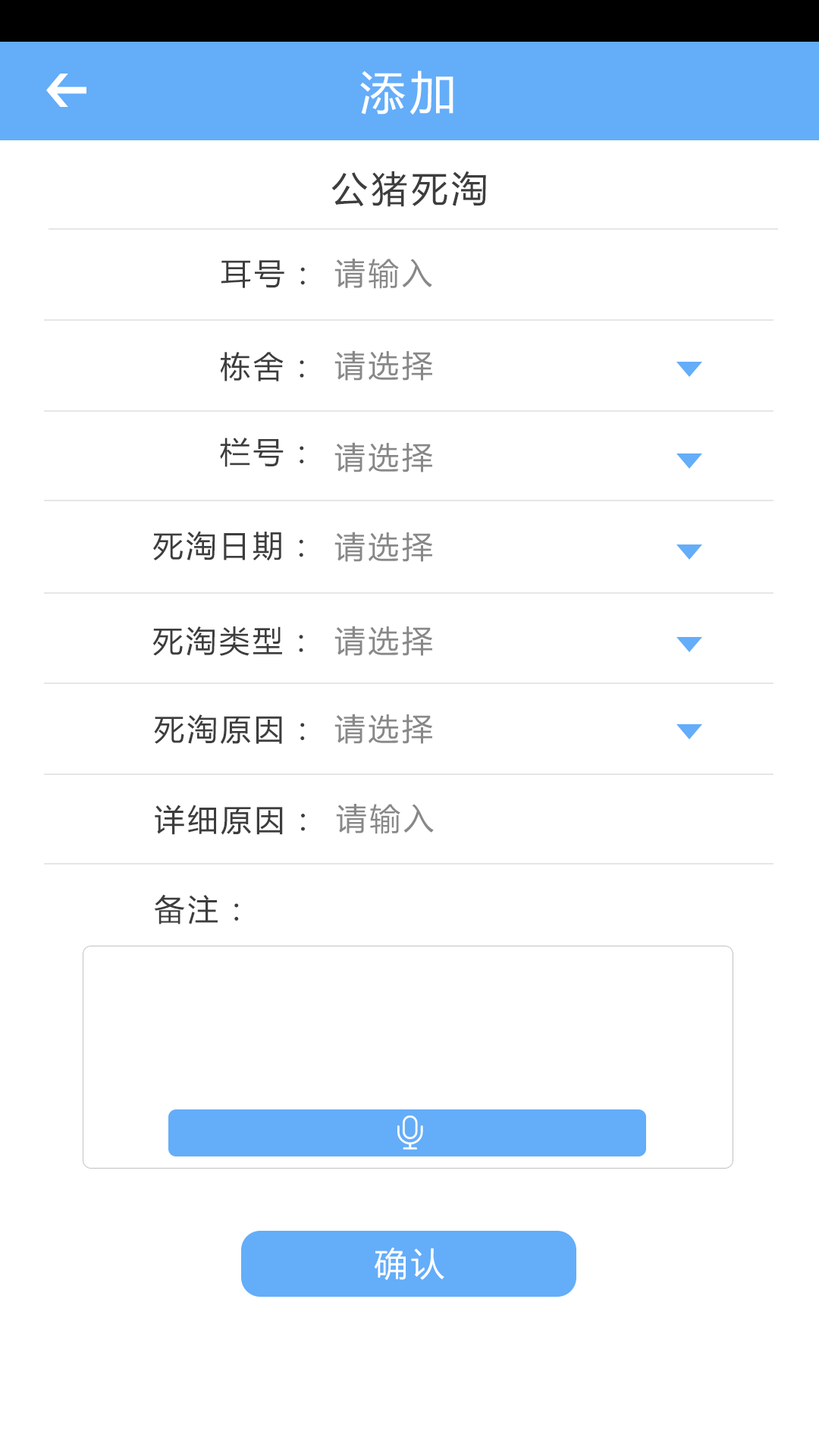
<style>
.page{position:relative;width:819px;height:1456px;background:#ffffff}
.page>*{position:absolute;margin:0}
.t1{font:45.5px "MicrosoftYaHei";letter-spacing:0.1em;color:#ffffff}
.t2{font:36.4px "MicrosoftYaHei";letter-spacing:0.1em;color:#3d3d3d}
.t3{font:30.3px "MicrosoftYaHei";letter-spacing:0.1em;color:#3d3d3d}
.t4{font:30.7px "MicrosoftYaHei";letter-spacing:0.1em;color:#898888}
.t5{font:33.4px "MicrosoftYaHei";letter-spacing:0.1em;color:#ffffff}
</style>
<div class="page">
<p class="t1" style="left:360px;top:71px;width:93px;height:44px">添加</p>
<p class="t2" style="left:331px;top:171px;width:155px;height:36px">公猪死淘</p>
<p class="t3" style="left:221px;top:260px;width:84px;height:28px">耳号：</p>
<p class="t4" style="left:334px;top:259px;width:98px;height:30px">请输入</p>
<p class="t3" style="left:220px;top:352px;width:84px;height:29px">栋舍：</p>
<p class="t4" style="left:334px;top:350px;width:98px;height:31px">请选择</p>
<p class="t3" style="left:220px;top:438px;width:84px;height:29px">栏号：</p>
<p class="t4" style="left:334px;top:442px;width:98px;height:30px">请选择</p>
<p class="t3" style="left:153px;top:531px;width:150px;height:30px">死淘日期：</p>
<p class="t4" style="left:334px;top:532px;width:98px;height:30px">请选择</p>
<p class="t3" style="left:152px;top:626px;width:151px;height:30px">死淘类型：</p>
<p class="t4" style="left:334px;top:626px;width:98px;height:30px">请选择</p>
<p class="t4" style="left:334px;top:714px;width:98px;height:30px">请选择</p>
<p class="t3" style="left:154px;top:714px;width:151px;height:31px">死淘原因：</p>
<p class="t3" style="left:155px;top:805px;width:150px;height:30px">详细原因：</p>
<p class="t4" style="left:336px;top:804px;width:98px;height:30px">请输入</p>
<p class="t3" style="left:154px;top:894px;width:85px;height:30px">备注：</p>
<p class="t5" style="left:374px;top:1247px;width:70px;height:33px">确认</p>
</div>
